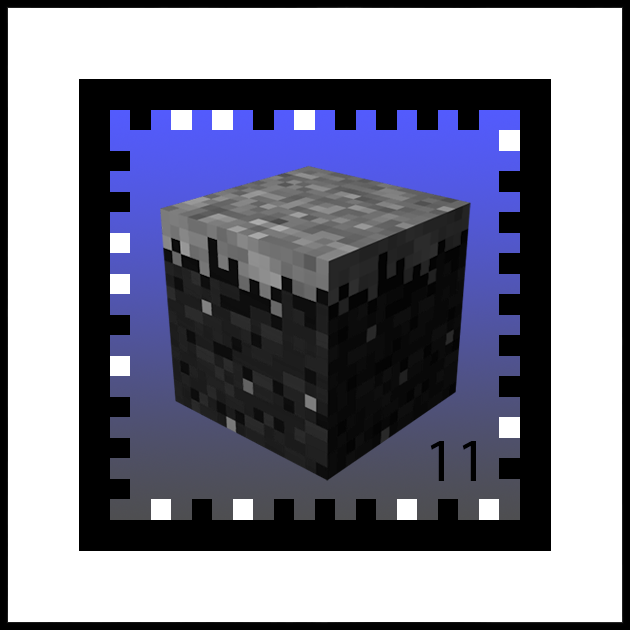
<style>
.page{position:relative;width:630px;height:630px;background:#ffffff}
.page>*{position:absolute;margin:0}
.t1{font:61.1px "MyriadPro-Regular";color:#000000;font-variant:small-caps}
</style>
<div class="page">
<p class="t1" style="left:430px;top:441px;width:46px;height:40px">11</p>
</div>
